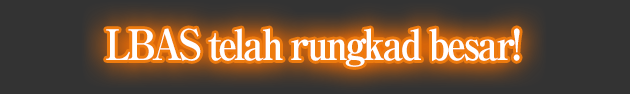
<style>
.page{position:relative;width:630px;height:94px;background:#333333}
.page>*{position:absolute;margin:0}
.t1{font:42px "RyuminPro-ExBold";letter-spacing:-0.08em;color:#ffffff;scale:0.9 1}
</style>
<div class="page">
<p class="t1" style="left:106px;top:28px;width:414px;height:39px">LBAS telah rungkad besar!</p>
</div>
